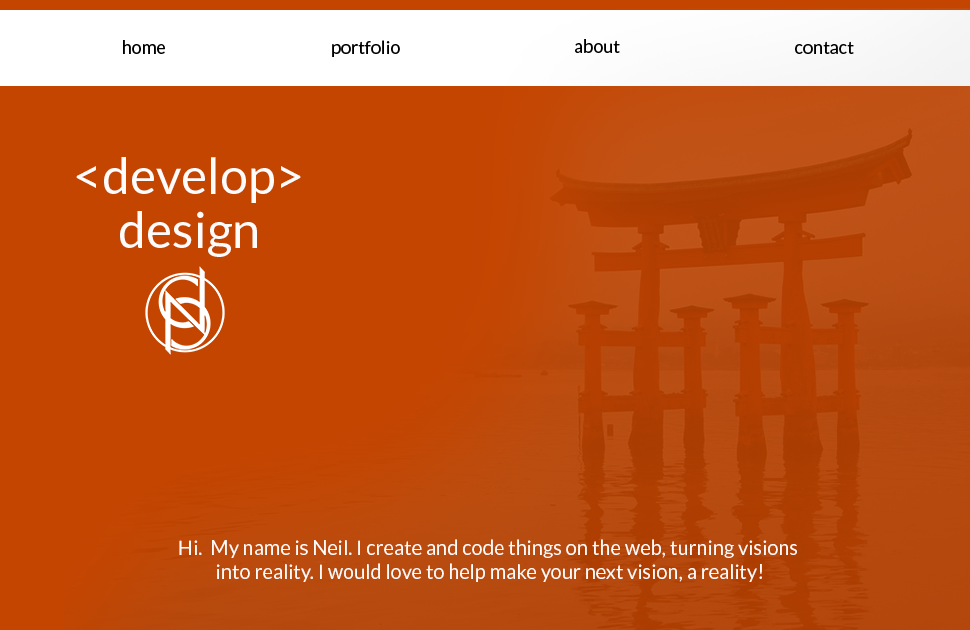
<style>
.page{position:relative;width:970px;height:630px;background:#c44500}
.page>*{position:absolute;margin:0}
.t1{font:18px "Lato-Regular";color:#000000}
.t2{font:50px "Lato-Regular";color:#fdfcfb}
.t3{font:20px "Lato-Regular";color:#fdfcfb}
</style>
<div class="page">
<p class="t1" style="left:123px;top:40px;width:42px;height:14px">home</p>
<p class="t1" style="left:332px;top:40px;width:68px;height:17px">portfolio</p>
<p class="t1" style="left:575px;top:39px;width:45px;height:14px">about</p>
<p class="t1" style="left:795px;top:41px;width:59px;height:13px">contact</p>
<p class="t2" style="left:76px;top:157px;width:225px;height:46px">&lt;develop&gt;</p>
<p class="t2" style="left:120px;top:211px;width:137px;height:46px">design</p>
<p class="t3" style="left:179px;top:539px;width:618px;height:43px;text-align:center">Hi.  My name is Neil. I create and code things on the web, turning visions <br>into reality. I would love to help make your next vision, a reality!</p>
</div>
